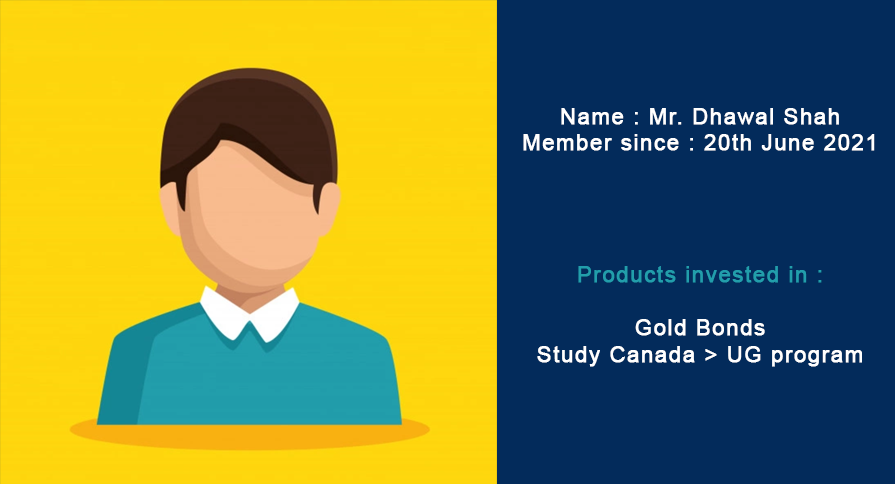
<style>
.page{position:relative;width:895px;height:484px;background:#032b5b}
.page>*{position:absolute;margin:0}
.t1{font:22px "ArialMT";letter-spacing:0.05em;color:#ffffff;font-weight:bold}
.t2{font:22px "ArialMT";letter-spacing:0.05em;color:#229eab;font-weight:bold}
</style>
<div class="page">
<p class="t1" style="left:523px;top:108px;width:352px;height:259px;text-align:center">Name : Mr. Dhawal Shah<br>Member since : 20th June 2021<br><br><br><br><br><span class="t2">Products invested in :<br></span><br>Gold Bonds<br>Study Canada &gt; UG program</p>
</div>
